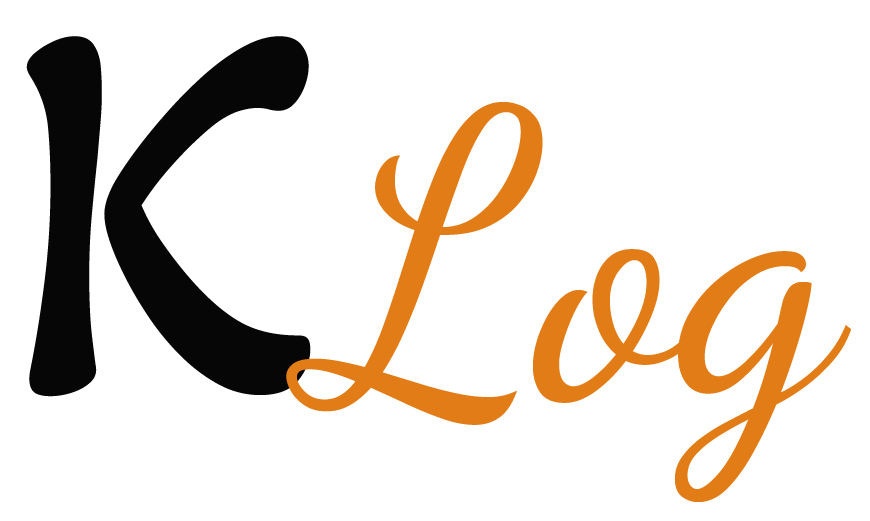
<style>
.page{position:relative;width:870px;height:521px;background:#ffffff}
.page>*{position:absolute;margin:0}
.t1{font:400px "DancingScript-Regular";color:#e27c16}
.t2{font:550px "AkayaTelivigala-Regular";color:#060606}
</style>
<div class="page">
<p class="t1" style="left:26px;top:36px;width:825px;height:466px"><span class="t2">K</span>Log</p>
</div>
